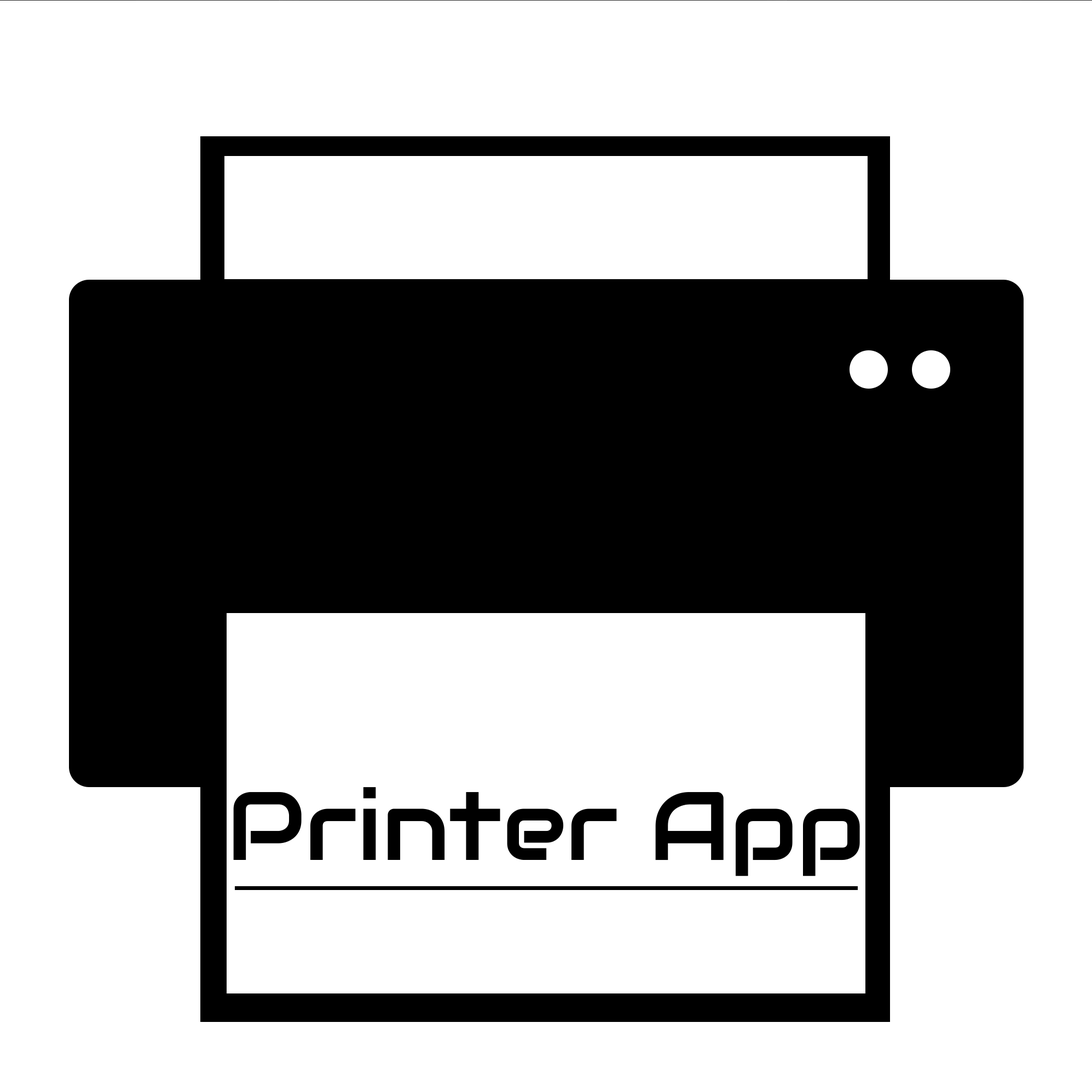
<style>
.page{position:relative;width:1092px;height:1092px;background:#ffffff}
.page>*{position:absolute;margin:0}
.t1{font:97.1px "Audiowide-Regular";color:#000000}
</style>
<div class="page">
<p class="t1" style="left:233px;top:787px;width:627px;height:89px">Printer App</p>
</div>
